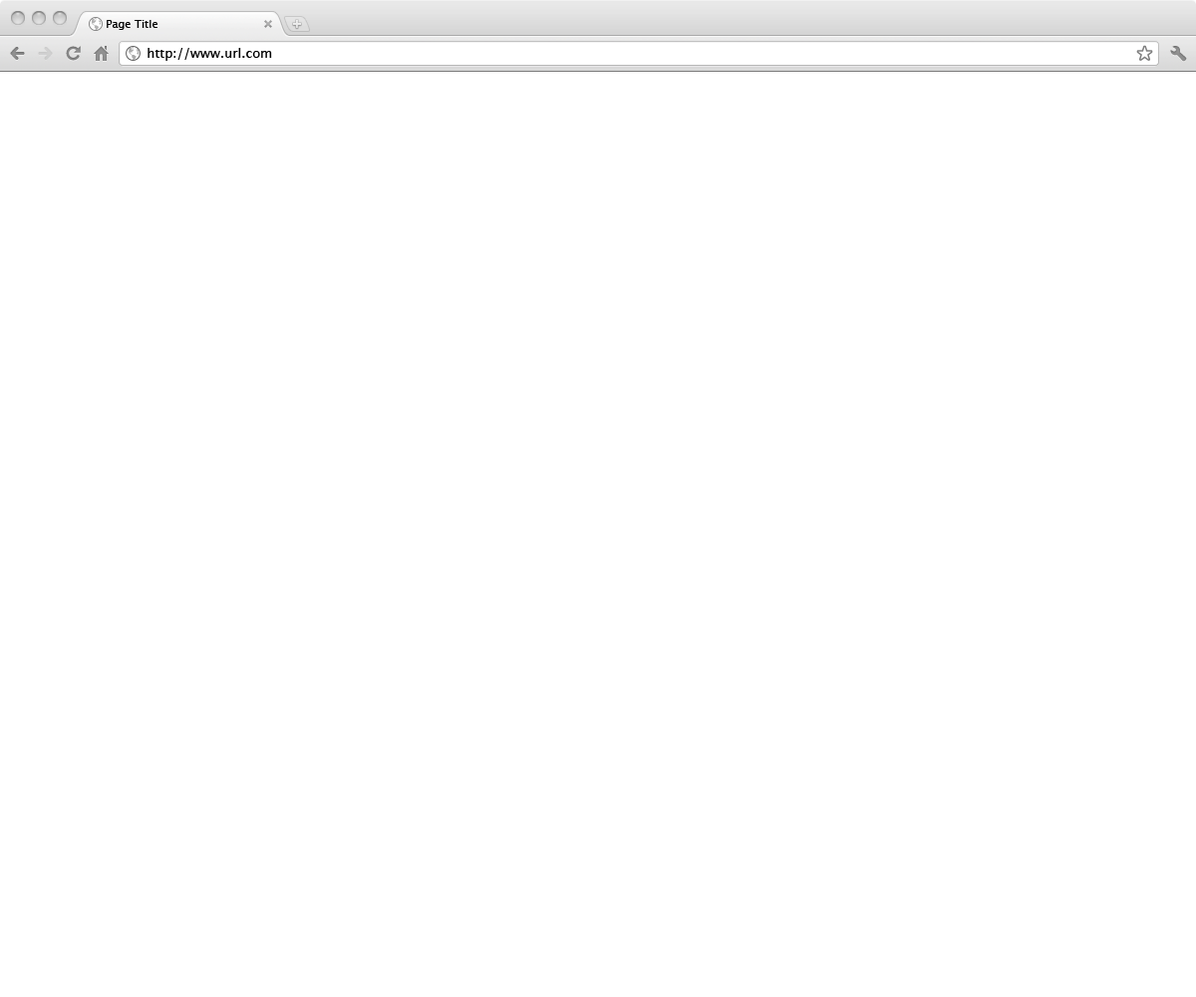
<style>
.page{position:relative;width:1196px;height:997px;background:#ffffff}
.page>*{position:absolute;margin:0}
.t1{font:11px "LucidaGrande";color:#000000}
.t2{font:13px "LucidaGrande";color:#000000}
</style>
<div class="page">
<p class="t1" style="left:107px;top:20px;width:51px;height:10px">Page Title</p>
<p class="t2" style="left:148px;top:48px;width:124px;height:13px">http://www.url.com</p>
</div>
